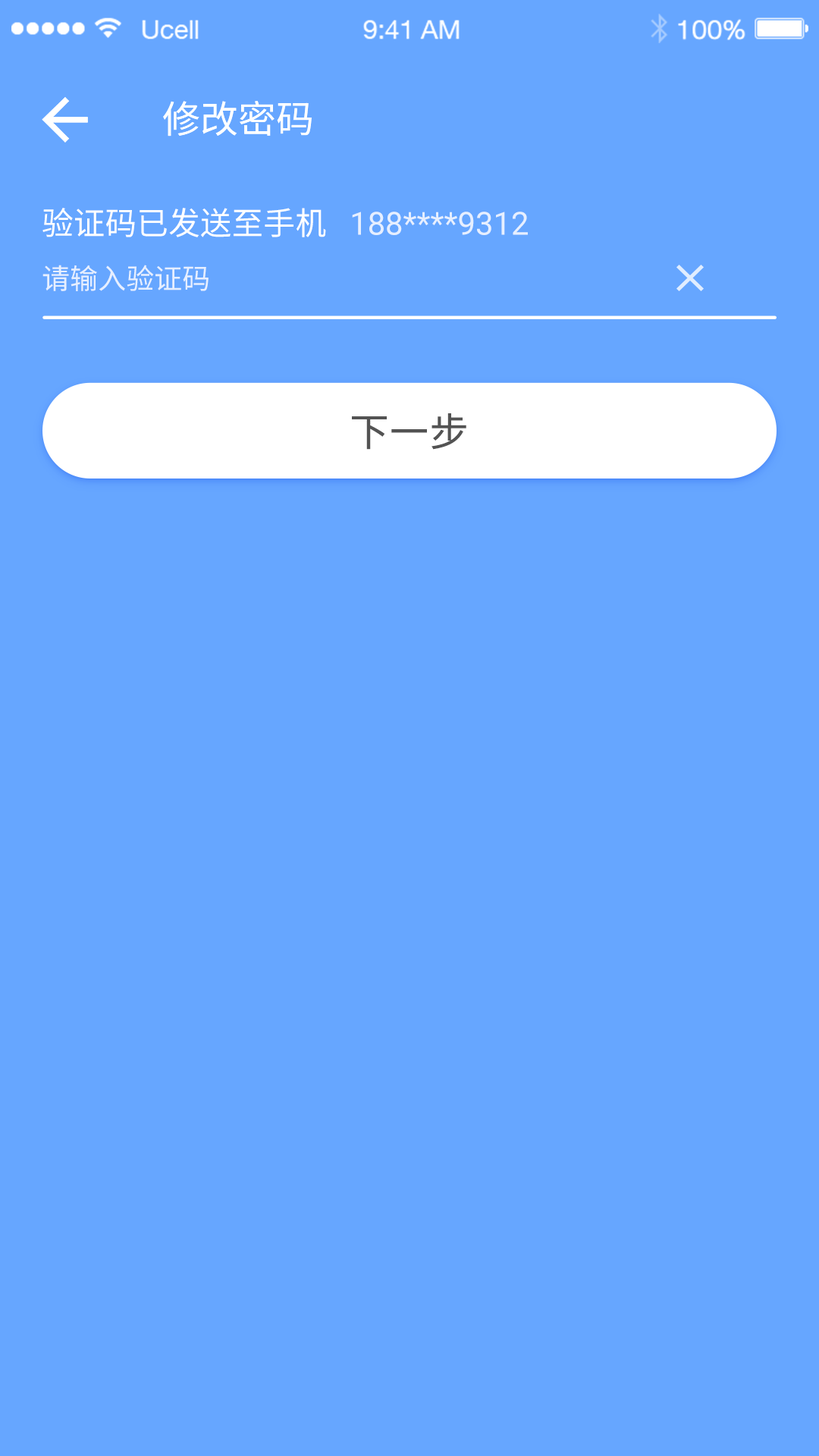
<style>
.page{position:relative;width:819px;height:1456px;background:#66a6ff}
.page>*{position:absolute;margin:0}
.t1{font:37.9px "NotoSansHans-Regular";color:#ffffff}
.t2{font:31.9px "NotoSansHans-Regular";color:#ffffff;text-transform:uppercase}
.t3{font:31.9px "Roboto-Regular";color:#e6efff;text-transform:uppercase}
.t4{font:28.3px "NotoSansHans-Regular";color:#e6efff;text-transform:uppercase}
.t5{font:39.2px "NotoSansHans-Regular";letter-spacing:0.02em;color:#535353}
</style>
<div class="page">
<p class="t1" style="left:163px;top:101px;width:149px;height:35px">修改密码</p>
<p class="t2" style="left:42px;top:208px;width:284px;height:29px">验证码已发送至手机</p>
<p class="t3" style="left:352px;top:212px;width:176px;height:23px">188****9312</p>
<p class="t4" style="left:42px;top:265px;width:167px;height:26px">请输入验证码</p>
<p class="t5" style="left:352px;top:413px;width:114px;height:37px">下一步</p>
</div>
